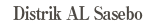
<style>
.page{position:relative;width:157px;height:27px;background:#ffffff}
.page>*{position:absolute;margin:0}
.t1{font:18px "RyuminPro-ExBold";letter-spacing:-0.04em;color:#4c4843;scale:0.9 1}
</style>
<div class="page">
<p class="t1" style="left:13px;top:6px;width:130px;height:15px">Distrik AL Sasebo</p>
</div>
